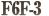
<style>
.page{position:relative;width:49px;height:16px;background:#ffffff}
.page>*{position:absolute;margin:0}
.t1{font:18px "RyuminPro-ExBold";letter-spacing:-0.06em;color:#4a3f32;font-weight:bold;scale:0.9 1}
</style>
<div class="page">
<p class="t1" style="left:1px;top:1px;width:41px;height:15px">F6F-3</p>
</div>
